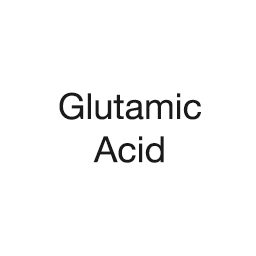
<style>
.page{position:relative;width:256px;height:256px;background:#ffffff}
.page>*{position:absolute;margin:0}
.t1{font:36px "HelveticaNeueLTPro-Roman";color:#1a1a1a}
</style>
<div class="page">
<p class="t1" style="left:59px;top:92px;width:142px;height:71px;text-align:center">Glutamic<br>Acid</p>
</div>
